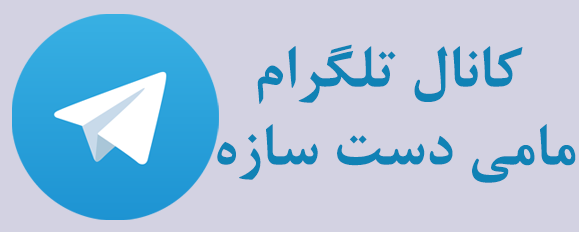
<style>
.page{position:relative;width:579px;height:232px;background:#d3d2e2}
.page>*{position:absolute;margin:0}
.t1{font:65px "BNazaninBold";color:#1082b5}
</style>
<div class="page">
<p class="t1" style="left:217px;top:44px;width:359px;height:139px;text-align:center">کانال تلگرام <br>مامی دست سازه</p>
</div>
